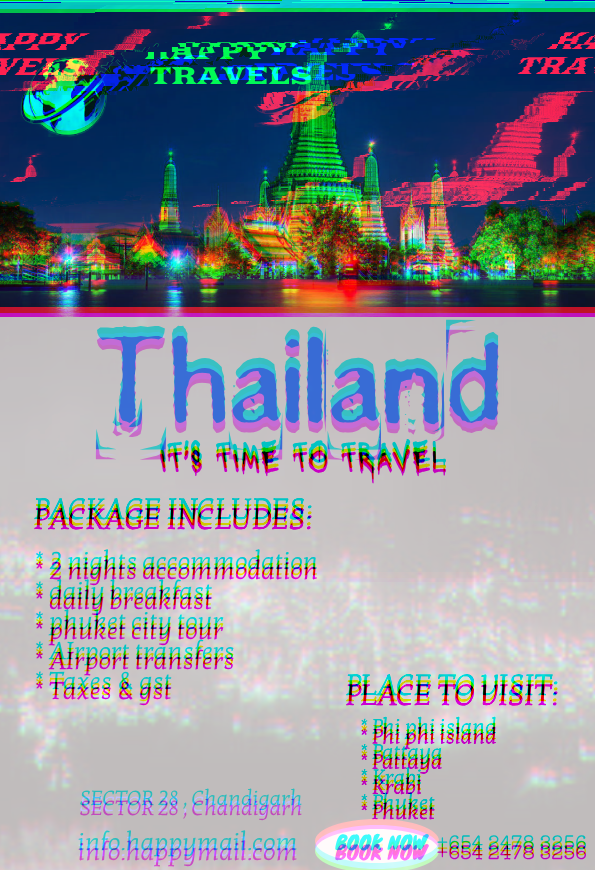
<style>
.page{position:relative;width:595px;height:870px}
.page>*{position:absolute;margin:0}
.t1{font:133px "KingthingsPrintingkit"}
.t2{font:30px "Lacquer-Regular"}
.t3{font:30px "KottaOne-Regular"}
.t4{font:25px "KottaOne-Regular"}
.t5{font:21px "KottaOne-Regular"}
.t6{font:19px "Knewave-Regular"}
</style>
<div class="page">
<p class="t1" style="left:95px;top:317px;width:404px;height:131px">Thailand</p>
<p class="t2" style="left:159px;top:436px;width:287px;height:36px">IT'S TIME TO TRAVEL</p>
<p class="t3" style="left:34px;top:496px;width:278px;height:22px">PACKAGE INCLUDES:</p>
<p class="t4" style="left:36px;top:547px;width:281px;height:147px">* 2 nights accommodation<br>* daily breakfast<br>* phuket city tour<br>* AIrport transfers<br>* Taxes &amp; gst</p>
<p class="t3" style="left:346px;top:672px;width:212px;height:22px">PLACE TO VISIT:</p>
<p class="t5" style="left:361px;top:714px;width:135px;height:94px">* Phi phi island<br>* Pattaya<br>* Krabi<br>* Phuket</p>
<p class="t5" style="left:80px;top:786px;width:222px;height:23px">SECTOR 28 , Chandigarh</p>
<p class="t4" style="left:78px;top:828px;width:219px;height:27px">info.happymail.com</p>
<p class="t6" style="left:335px;top:831px;width:94px;height:18px">BOOK NOW</p>
</div>
